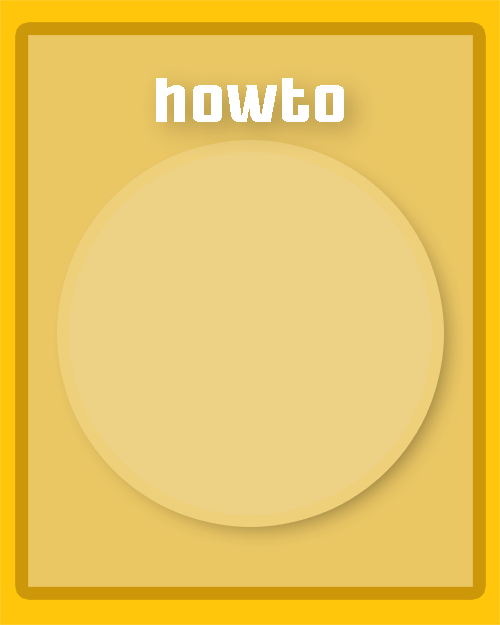
<style>
.page{position:relative;width:500px;height:625px;background:#edd285}
.page>*{position:absolute;margin:0}
.t1{font:91.7px "chuanchiim-Regular";color:#ffffff}
</style>
<div class="page">
<p class="t1" style="left:156px;top:78px;width:188px;height:44px">howto</p>
</div>
